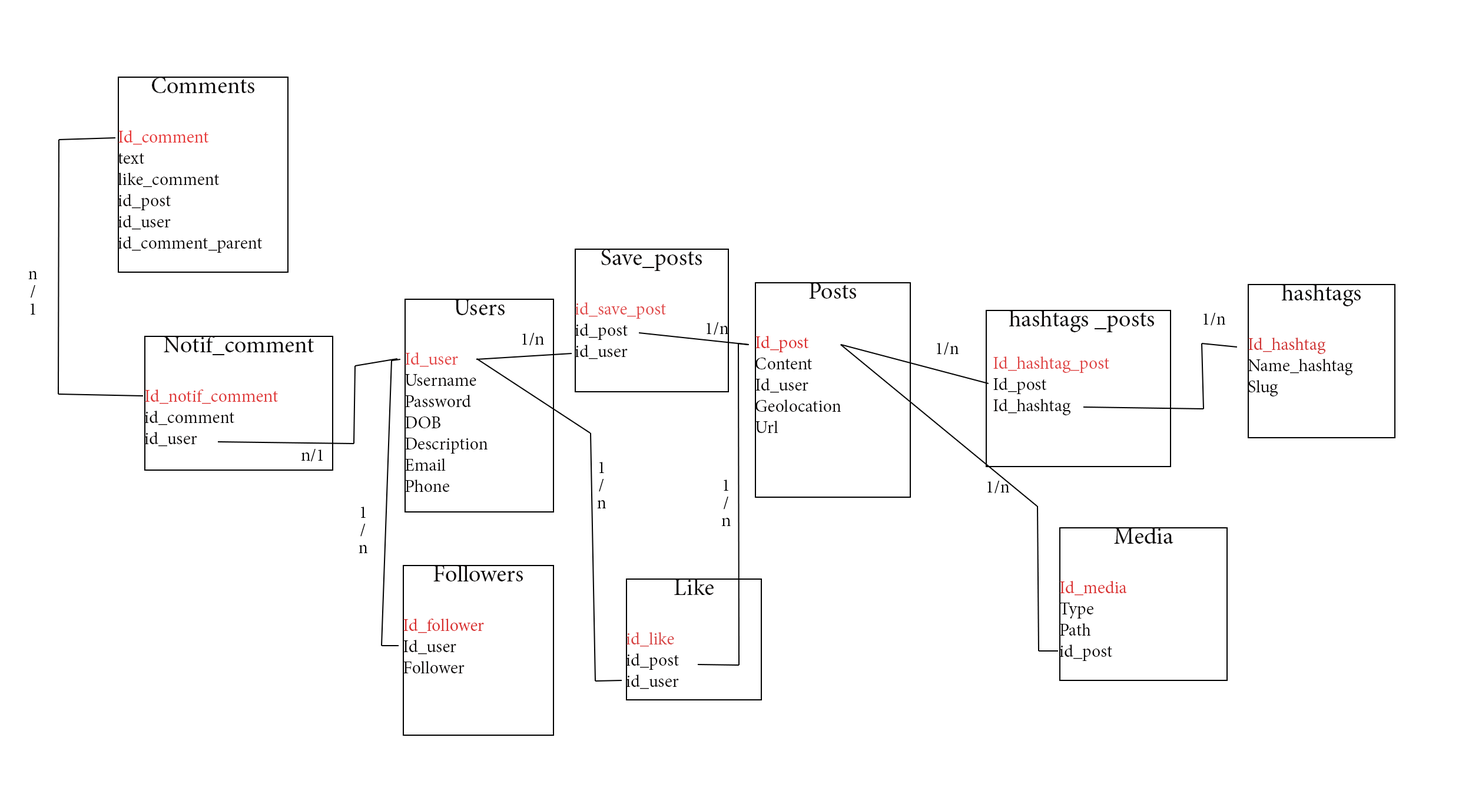
<style>
.page{position:relative;width:1472px;height:810px;background:#ffffff}
.page>*{position:absolute;margin:0}
.t1{font:17.7px "MinionPro-Regular";color:#0d0a0a}
.t2{font:23.6px "MinionPro-Regular";color:#0d0a0a}
.t3{font:17.7px "MinionPro-Regular";color:#e73939}
.t4{font:17.7px "MinionPro-Regular";color:#e14d4d}
.t5{font:17.7px "MinionPro-Regular";color:#000000}
.t6{font:17.7px "MinionPro-Regular";color:#dc2d2d}
.t7{font:17.7px "MinionPro-Regular";color:#d13535}
.t8{font:17.7px "MinionPro-Regular";color:#e44747}
.t9{font:17.7px "MinionPro-Regular";color:#df4444}
.t10{font:17.7px "MinionPro-Regular";color:#df3737}
.t11{font:17.7px "MinionPro-Regular";color:#db3434}
.t12{font:17.7px "MinionPro-Regular";color:#d92f2f}
.t13{font:17.7px "MinionPro-Regular";color:#d74444}
</style>
<div class="page">
<p class="t1" style="left:118px;top:77px;width:144px;height:176px;text-align:center"><span class="t2">Comments<br><br></span><span class="t3">Id_comment<br></span>text<br>like_comment<br>id_post<br>id_user<br>id_comment_parent</p>
<p class="t1" style="left:575px;top:249px;width:127px;height:110px;text-align:center"><span class="t2">Save_posts<br><br></span><span class="t4">id_save_post<br></span>id_post<br>id_user</p>
<p class="t5" style="left:28px;top:271px;width:9px;height:44px">n/1</p>
<p class="t1" style="left:756px;top:283px;width:100px;height:150px;text-align:center"><span class="t2">Posts<br><br></span><span class="t6">Id_post<br></span>Content<br>Id_user<br>Geolocation<br>Url</p>
<p class="t1" style="left:1248px;top:284px;width:113px;height:112px;text-align:center"><span class="t2">hashtags <br><br></span><span class="t7">Id_hashtag<br></span>Name_hashtag<br>Slug</p>
<p class="t1" style="left:405px;top:299px;width:100px;height:193px;text-align:center"><span class="t2">Users<br><br></span><span class="t8">Id_user<br></span>Username<br>Password<br>DOB<br>Description<br>Email<br>Phone</p>
<p class="t1" style="left:994px;top:310px;width:160px;height:105px;text-align:center"><span class="t2">hashtags _posts<br><br></span><span class="t9">Id_hashtag_post<br></span>Id_post<br>Id_hashtag</p>
<p class="t5" style="left:1204px;top:313px;width:22px;height:13px">1/n</p>
<p class="t5" style="left:707px;top:322px;width:22px;height:13px">1/n</p>
<p class="t1" style="left:145px;top:336px;width:169px;height:110px;text-align:center"><span class="t2">Notif_comment<br><br></span><span class="t10">Id_notif_comment<br></span>id_comment<br>id_user</p>
<p class="t5" style="left:522px;top:333px;width:22px;height:13px">1/n</p>
<p class="t5" style="left:937px;top:342px;width:22px;height:13px">1/n</p>
<p class="t5" style="left:301px;top:449px;width:22px;height:13px">n/1</p>
<p class="t5" style="left:597px;top:462px;width:9px;height:46px">1/n</p>
<p class="t5" style="left:721px;top:479px;width:10px;height:47px">1/n</p>
<p class="t5" style="left:988px;top:481px;width:22px;height:13px">1/n</p>
<p class="t5" style="left:359px;top:507px;width:9px;height:46px">1/n</p>
<p class="t1" style="left:1060px;top:527px;width:114px;height:134px;text-align:center"><span class="t2">Media<br><br></span><span class="t11">Id_media<br></span>Type<br>Path<br>id_post</p>
<p class="t1" style="left:403px;top:565px;width:120px;height:108px;text-align:center"><span class="t2">Followers<br><br></span><span class="t12">Id_follower<br></span>Id_user<br>Follower</p>
<p class="t1" style="left:627px;top:578px;width:87px;height:111px;text-align:center"><span class="t2">Like<br><br></span><span class="t13">id_like<br></span>id_post<br>id_user</p>
</div>
